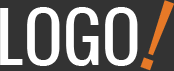
<style>
.page{position:relative;width:174px;height:71px;background:#333333}
.page>*{position:absolute;margin:0}
.t1{font:81.2px "Oswald";color:#e77927}
.t2{font:65.5px "Oswald";color:#ffffff}
</style>
<div class="page">
<p class="t1" style="left:140px;top:0px;width:34px;height:71px;rotate:20deg">!</p>
<p class="t2" style="left:0px;top:7px;width:138px;height:59px">LOGO</p>
</div>
